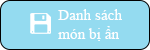
<style>
.page{position:relative;width:150px;height:50px;background:#94dbf0}
.page>*{position:absolute;margin:0}
.t1{font:15.3px "TimesNewRomanPSMT";color:#fefefe}
</style>
<div class="page">
<p class="t1" style="left:58px;top:9px;width:64px;height:32px">Danh sách <br>món bị ẩn</p>
</div>
